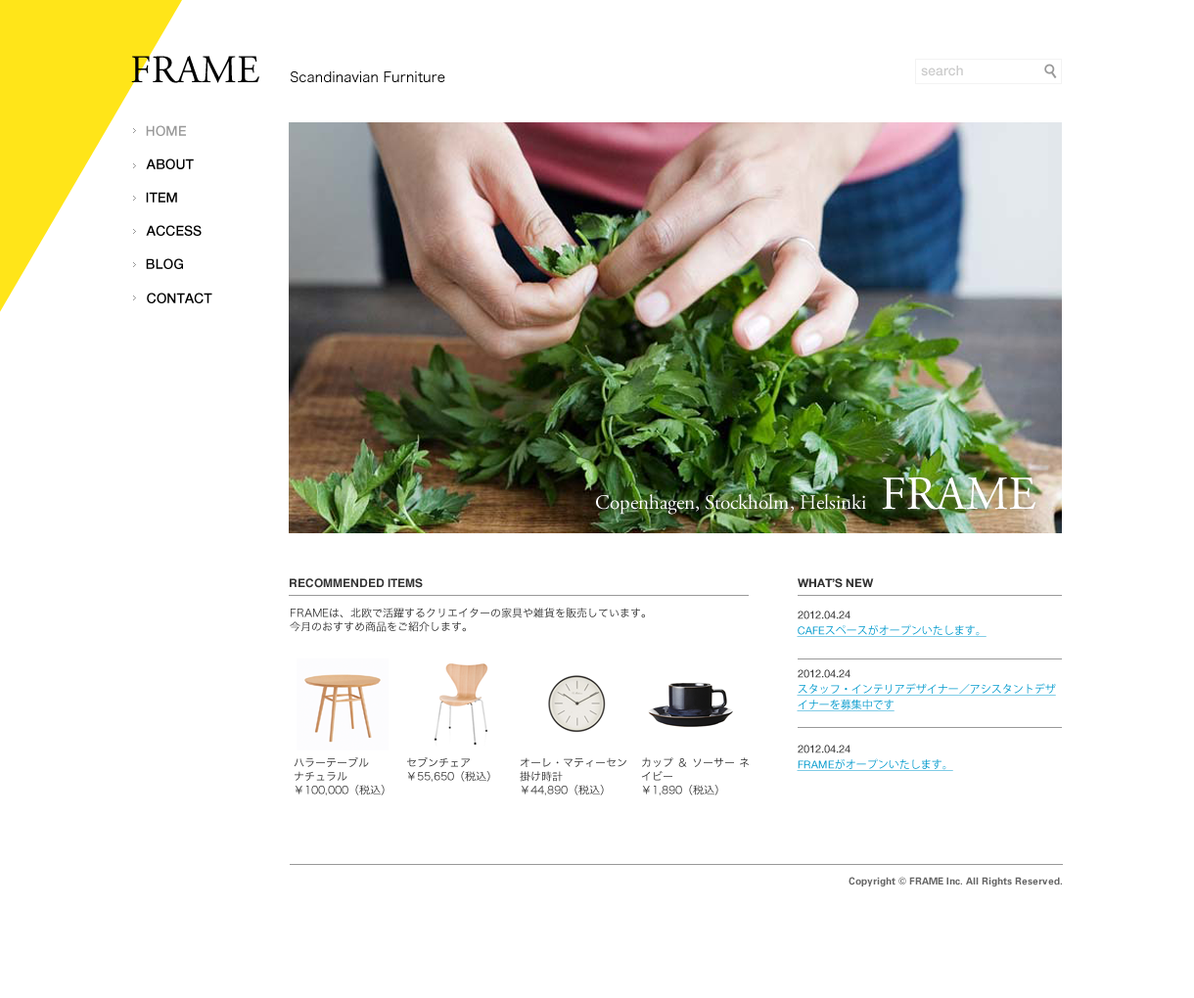
<style>
.page{position:relative;width:1194px;height:998px;background:#ffffff}
.page>*{position:absolute;margin:0}
.t1{font:39.2px "AGaramondPro-Regular";color:#000000}
.t2{font:13.7px "HelveticaNeueLTStd-Md";color:#cccccc}
.t3{font:13.7px "HiraKakuPro-W3";color:#000000}
.t4{font:13.7px "HelveticaNeueLTStd-Md";color:#999999}
.t5{font:13.7px "HelveticaNeueLTStd-Md";color:#000000}
.t6{font:47px "AGaramondPro-Regular";color:#ffffff}
.t7{font:20.6px "AGaramondPro-Regular";color:#ffffff}
.t8{font:11.7px "HelveticaLTStd-Bold";color:#333333}
.t9{font:11.7px "HelveticaNeueLTStd-Bd";color:#333333}
.t10{font:10.8px/13.7px "HiraKakuPro-W3";color:#333333}
.t11{font:10.8px "HelveticaNeueLTStd-Roman";color:#333333}
.t12{font:10.8px "KozGoPr6N-Regular";text-decoration:underline}
.t13{font:10.8px "HelveticaNeueLTStd-Roman";text-decoration:underline}
.t14{font:10.8px/15.7px "KozGoPr6N-Regular";color:#0099cc;text-decoration:underline}
.t15{font:10.8px "KozGoPr6N-Regular";color:#0099cc;text-decoration:underline}
.t16{font:10.8px "HelveticaNeueLTStd-Roman";color:#0099cc;text-decoration:underline}
.t17{font:9.8px "UniversLTStd-Bold";color:#666666}
</style>
<div class="page">
<p class="t1" style="left:131px;top:56px;width:128px;height:27px">FRAME</p>
<p class="t2" style="left:921px;top:66px;width:42px;height:10px">search</p>
<p class="t3" style="left:291px;top:71px;width:154px;height:11px">Scandinavian Furniture</p>
<p class="t4" style="left:146px;top:125px;width:40px;height:11px">HOME</p>
<p class="t5" style="left:146px;top:159px;width:48px;height:10px">ABOUT</p>
<p class="t5" style="left:146px;top:192px;width:31px;height:11px">ITEM</p>
<p class="t5" style="left:146px;top:225px;width:56px;height:11px">ACCESS</p>
<p class="t5" style="left:146px;top:258px;width:37px;height:11px">BLOG</p>
<p class="t5" style="left:147px;top:293px;width:65px;height:10px">CONTACT</p>
<p class="t6" style="left:882px;top:477px;width:154px;height:33px">FRAME</p>
<p class="t7" style="left:596px;top:494px;width:270px;height:21px">Copenhagen, Stockholm, Helsinki</p>
<p class="t8" style="left:290px;top:579px;width:133px;height:9px">RECOMMENDED ITEMS</p>
<p class="t9" style="left:798px;top:579px;width:76px;height:9px">WHAT’S NEW</p>
<p class="t10" style="left:290px;top:608px;width:355px;height:24px">FRAMEは、北欧で活躍するクリエイターの家具や雑貨を販売しています。<br>今月のおすすめ商品をご紹介します。</p>
<p class="t11" style="left:798px;top:611px;width:53px;height:9px">2012.04.24</p>
<p class="t12" style="left:797px;top:625px;width:190px;height:12px"><span class="t13">CAFE</span>スペースがオープンいたします。</p>
<p class="t11" style="left:798px;top:670px;width:53px;height:8px">2012.04.24</p>
<p class="t14" style="left:797px;top:683px;width:259px;height:29px">スタッフ・インテリアデザイナー／アシスタントデザ<br>イナーを募集中です</p>
<p class="t11" style="left:798px;top:745px;width:53px;height:9px">2012.04.24</p>
<p class="t10" style="left:294px;top:757px;width:91px;height:39px">ハラーテーブル　<br>ナチュラル<br>￥100,000（税込）</p>
<p class="t10" style="left:407px;top:757px;width:83px;height:25px">セブンチェア<br>￥55,650（税込）</p>
<p class="t10" style="left:520px;top:758px;width:106px;height:38px">オーレ・マティーセン 掛け時計<br>￥44,890（税込）</p>
<p class="t10" style="left:641px;top:758px;width:108px;height:38px">カップ ＆ ソーサー ネイビー<br>￥1,890（税込）</p>
<p class="t15" style="left:797px;top:759px;width:156px;height:12px"><span class="t16">FRAME</span>がオープンいたします。</p>
<p class="t17" style="left:849px;top:877px;width:213px;height:10px">Copyright © FRAME Inc. All Rights Reserved.</p>
</div>
